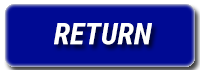
<style>
.page{position:relative;width:200px;height:70px;background:#000a93}
.page>*{position:absolute;margin:0}
.t1{font:30px "RobotoCondensed-BoldItalic";color:#ffffff}
</style>
<div class="page">
<p class="t1" style="left:54px;top:23px;width:98px;height:22px">RETURN</p>
</div>
